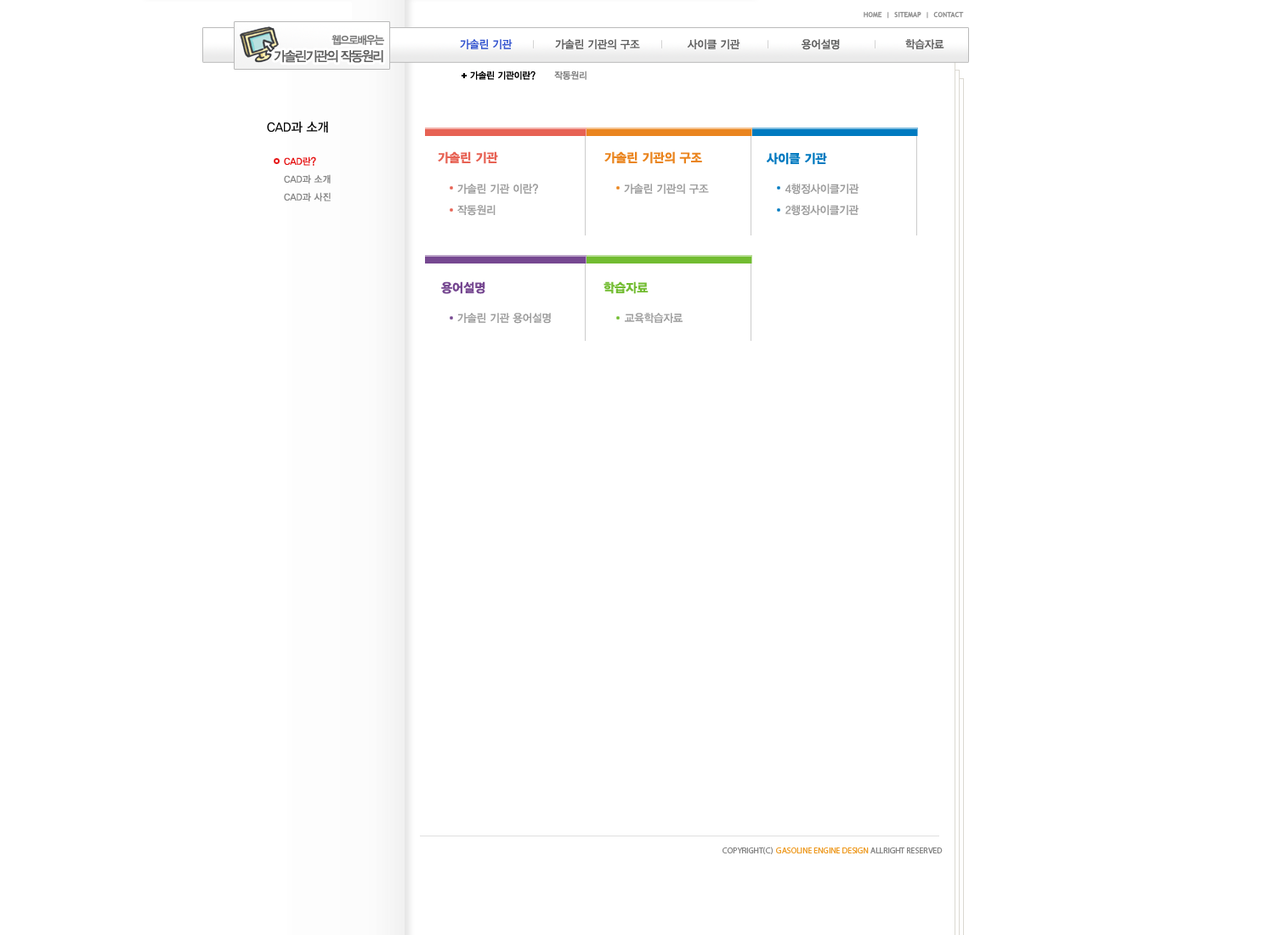
<style>
.page{position:relative;width:1275px;height:935px;background:#ffffff}
.page>*{position:absolute;margin:0}
.t1{font:6.8px "TrebuchetMS";color:#929292;text-transform:uppercase;font-weight:bold}
.t2{font:13.6px/17px "YDIYGO130";letter-spacing:-0.1em;color:#606060;scale:0.95 1}
.t3{font:11.1px/17px "YDIYGO130";letter-spacing:-0.1em;color:#767676;scale:0.95 1}
.t4{font:11.1px "YDIYGO130";color:#3455cf;text-transform:uppercase;scale:0.95 1}
.t5{font:11.1px "YDIYGO130";color:#606060;text-transform:uppercase;scale:0.95 1}
.t6{font:9.4px "YDIYGO130";color:#000000;text-transform:uppercase;scale:0.95 1}
.t7{font:9.4px "YDIYGO130";color:#808080;text-transform:uppercase;scale:0.95 1}
.t8{font:12.8px "YDIYGO130";color:#000000;text-transform:uppercase;scale:0.95 1}
.t9{font:9.4px/17.9px "YDIYGO130";color:#888888;text-transform:uppercase;font-weight:bold;scale:0.95 1}
.t10{font:9.4px/17.9px "YDIYGO130";color:#e50f0f;text-transform:uppercase;font-weight:bold;scale:0.95 1}
.t11{font:12.8px "YDIYGO150";color:#e76254;text-transform:uppercase;scale:0.95 1}
.t12{font:12.8px "YDIYGO150";color:#ea851f;text-transform:uppercase;scale:0.95 1}
.t13{font:12.8px "YDIYGO150";color:#007ac0;text-transform:uppercase;scale:0.95 1}
.t14{font:11.1px/21.3px "YDIYGO130";color:#9e9e9e;text-transform:uppercase;scale:0.95 1}
.t15{font:11.1px "YDIYGO130";color:#9e9e9e;text-transform:uppercase;scale:0.95 1}
.t16{font:12.8px "YDIYGO150";color:#764891;text-transform:uppercase;scale:0.95 1}
.t17{font:12.8px "YDIYGO150";color:#72bc31;text-transform:uppercase;scale:0.95 1}
.t18{font:8.5px "MyriadPro-Regular";letter-spacing:-0.01em;color:#ee9d28;text-transform:uppercase}
.t19{font:8.5px "MyriadPro-Regular";letter-spacing:-0.01em;color:#868686;text-transform:uppercase}
</style>
<div class="page">
<p class="t1" style="left:864px;top:12px;width:100px;height:7px">home  |  sitemap  |  contact</p>
<p class="t2" style="left:274px;top:35px;width:110px;height:28px;text-align:right"><span class="t3">웹으로배우는<br></span>가솔린기관의 작동원리</p>
<p class="t4" style="left:460px;top:39px;width:53px;height:10px">가솔린 기관</p>
<p class="t5" style="left:555px;top:39px;width:85px;height:10px">가솔린 기관의 구조</p>
<p class="t5" style="left:687px;top:39px;width:53px;height:10px">사이클 기관</p>
<p class="t5" style="left:802px;top:39px;width:38px;height:11px">용어설명</p>
<p class="t5" style="left:905px;top:39px;width:39px;height:10px">학습자료</p>
<p class="t6" style="left:470px;top:71px;width:117px;height:9px">가솔린 기관이란?<span class="t7">      작동원리</span></p>
<p class="t8" style="left:267px;top:122px;width:61px;height:11px">CAD과 소개</p>
<p class="t9" style="left:284px;top:156px;width:47px;height:45px"><span class="t10">cad란?<br></span>cad과 소개<br>cad과 사진</p>
<p class="t11" style="left:438px;top:151px;width:60px;height:13px">가솔린 기관</p>
<p class="t12" style="left:604px;top:151px;width:98px;height:13px">가솔린 기관의 구조</p>
<p class="t13" style="left:766px;top:152px;width:61px;height:13px">사이클 기관</p>
<p class="t14" style="left:457px;top:184px;width:81px;height:32px">가솔린 기관 이란?<br>작동원리</p>
<p class="t15" style="left:624px;top:184px;width:85px;height:10px">가솔린 기관의 구조</p>
<p class="t14" style="left:786px;top:184px;width:73px;height:32px">4행정사이클기관<br>2행정사이클기관</p>
<p class="t16" style="left:441px;top:281px;width:44px;height:13px">용어설명</p>
<p class="t17" style="left:604px;top:281px;width:45px;height:13px">학습자료</p>
<p class="t15" style="left:457px;top:313px;width:94px;height:11px">가솔린 기관 용어설명</p>
<p class="t15" style="left:625px;top:313px;width:58px;height:10px">교육학습자료</p>
<p class="t18" style="left:723px;top:847px;width:220px;height:7px"><span class="t19">copyright(c)  </span>gasoline engine design<span class="t19"> allright reserved</span></p>
</div>
